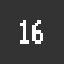
<style>
.page{position:relative;width:64px;height:64px;background:#333333}
.page>*{position:absolute;margin:0}
.t1{font:40.9px "Glasstown-NBP";letter-spacing:0.005em;color:#ffffff;font-weight:bold}
</style>
<div class="page">
<p class="t1" style="left:20px;top:20px;width:23px;height:24px">16</p>
</div>
